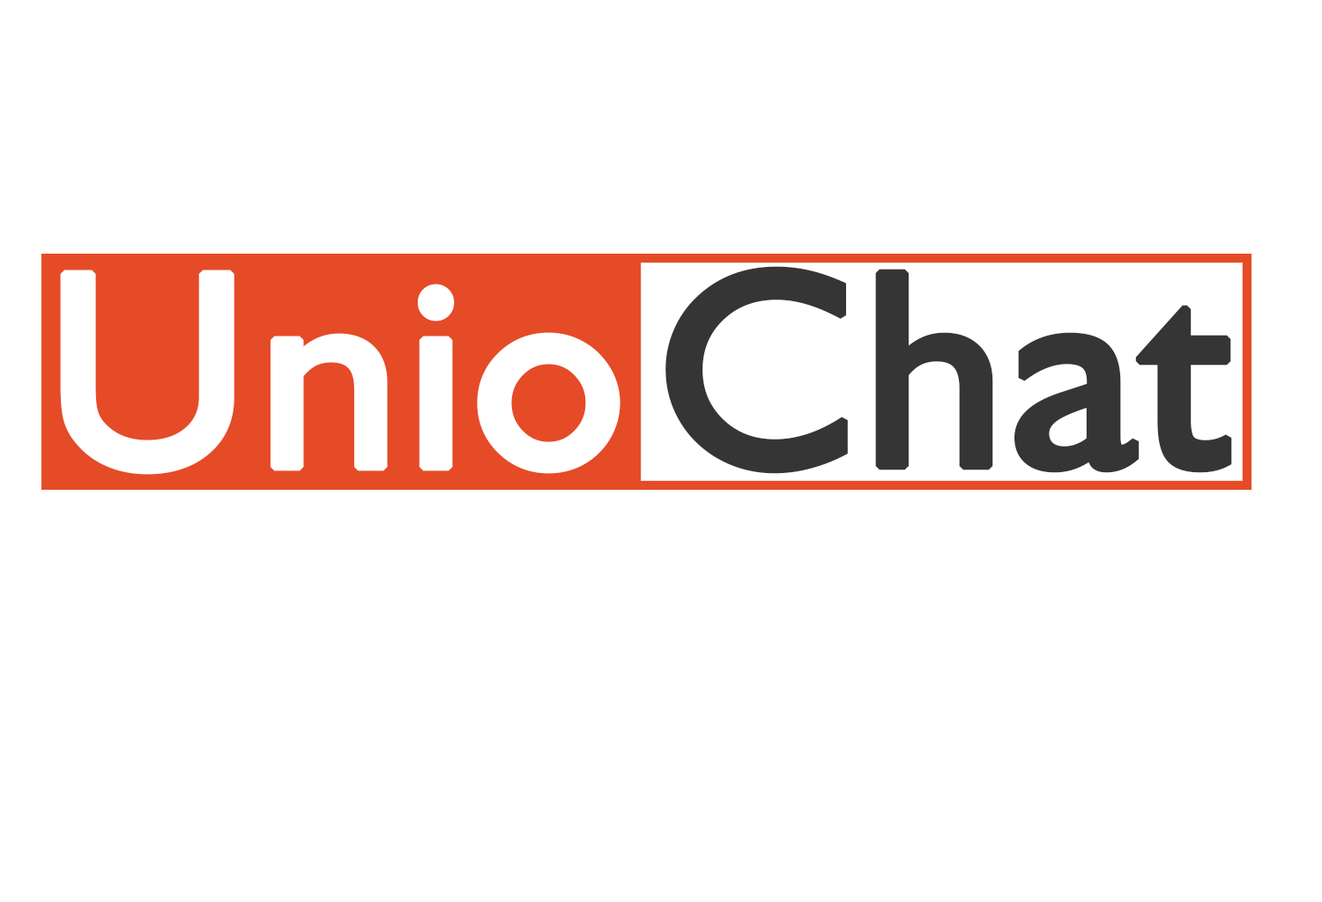
<style>
.page{position:relative;width:1322px;height:902px;background:#ffffff}
.page>*{position:absolute;margin:0}
.t1{font:281.9px "Humanist521BT-Roman";color:#ffffff;font-weight:bold}
.t2{font:281.9px "Humanist521BT-Roman";color:#353535;font-weight:bold}
</style>
<div class="page">
<p class="t1" style="left:60px;top:270px;width:560px;height:205px">Unio</p>
<p class="t2" style="left:665px;top:266px;width:567px;height:208px">Chat</p>
</div>
